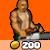
<style>
.page{position:relative;width:50px;height:50px;background:#ff5d00}
.page>*{position:absolute;margin:0}
.t1{font:10px "MFWenYan_Noncommercial-Regular";letter-spacing:-0.06em;color:#ffffff}
</style>
<div class="page">
<p class="t1" style="left:22px;top:42px;width:18px;height:7px">200</p>
</div>
